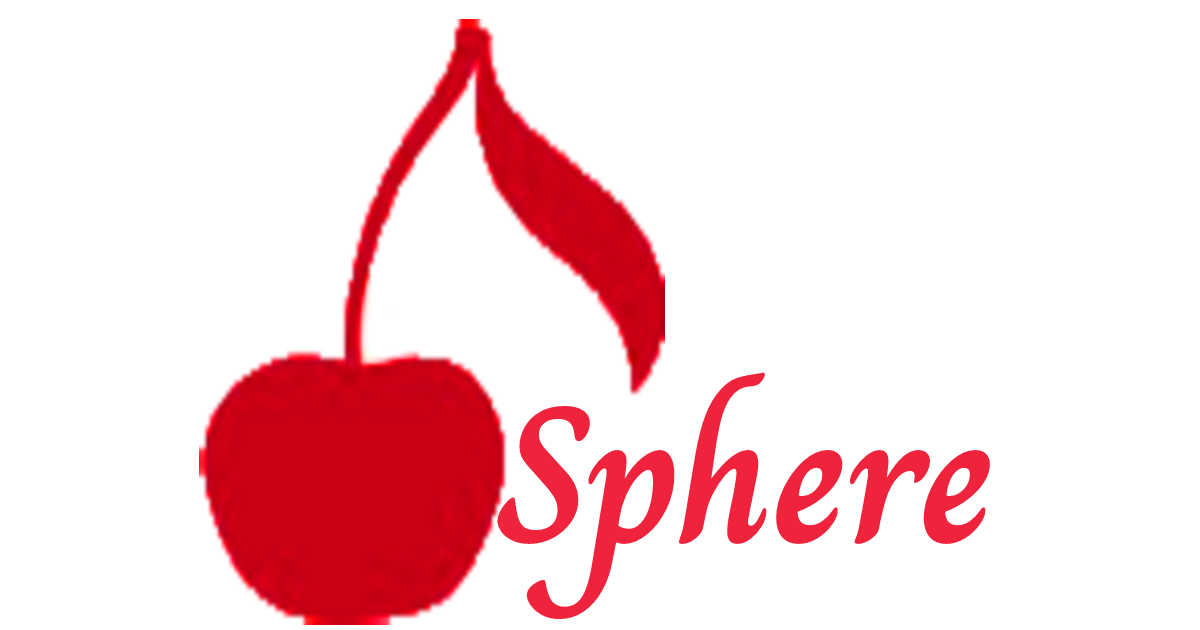
<style>
.page{position:relative;width:1200px;height:630px;background:#ffffff}
.page>*{position:absolute;margin:0}
.t1{font:193.2px "Charm-Bold";color:#ef233c;scale:1.04 1}
</style>
<div class="page">
<p class="t1" style="left:497px;top:372px;width:493px;height:247px">Sphere</p>
</div>
